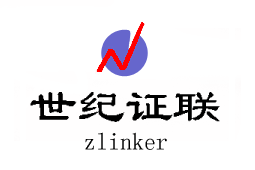
<style>
.page{position:relative;width:255px;height:170px;background:#ffffff}
.page>*{position:absolute;margin:0}
.t1{font:48px "Á¥Êé-Regular";color:#000000}
.t2{font:24px "Á¥Êé-Regular";color:#000000}
</style>
<div class="page">
<p class="t1" style="left:30px;top:92px;width:190px;height:30px">世纪证联</p>
<p class="t2" style="left:85px;top:132px;width:82px;height:18px">zlinker</p>
</div>
